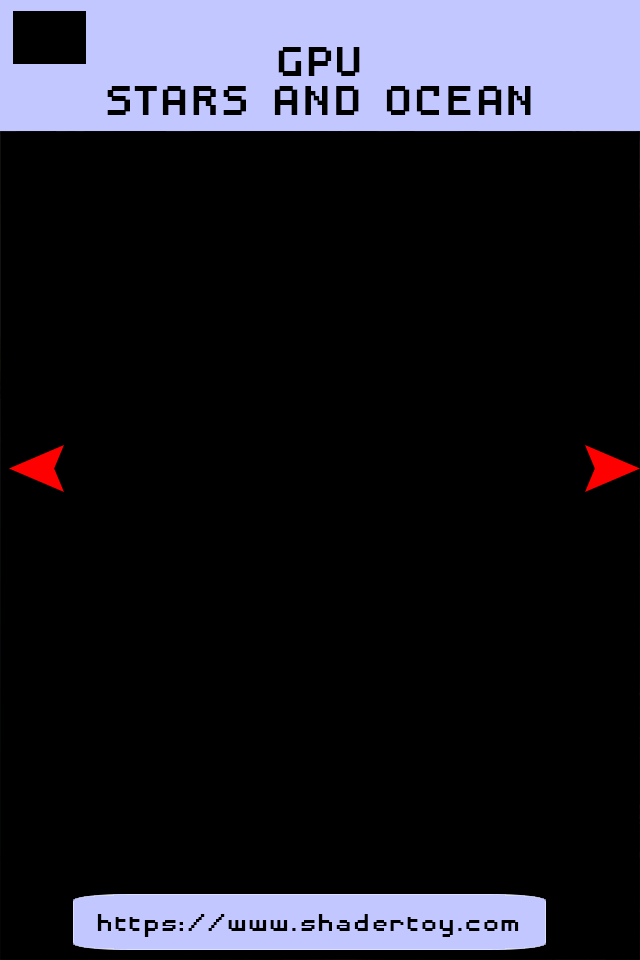
<style>
.page{position:relative;width:640px;height:960px;background:#000000}
.page>*{position:absolute;margin:0}
.t1{font:54.7px/38.8px "DisposableDroidBB";color:#000000;scale:1.14 1}
.t2{font:31.9px "DisposableDroidBB";color:#000000;scale:1.14 1}
</style>
<div class="page">
<p class="t1" style="left:107px;top:47px;width:424px;height:68px;text-align:center">GPU<br>STARS AND OCEAN</p>
<p class="t2" style="left:97px;top:914px;width:422px;height:23px">https://www.shadertoy.com</p>
</div>
